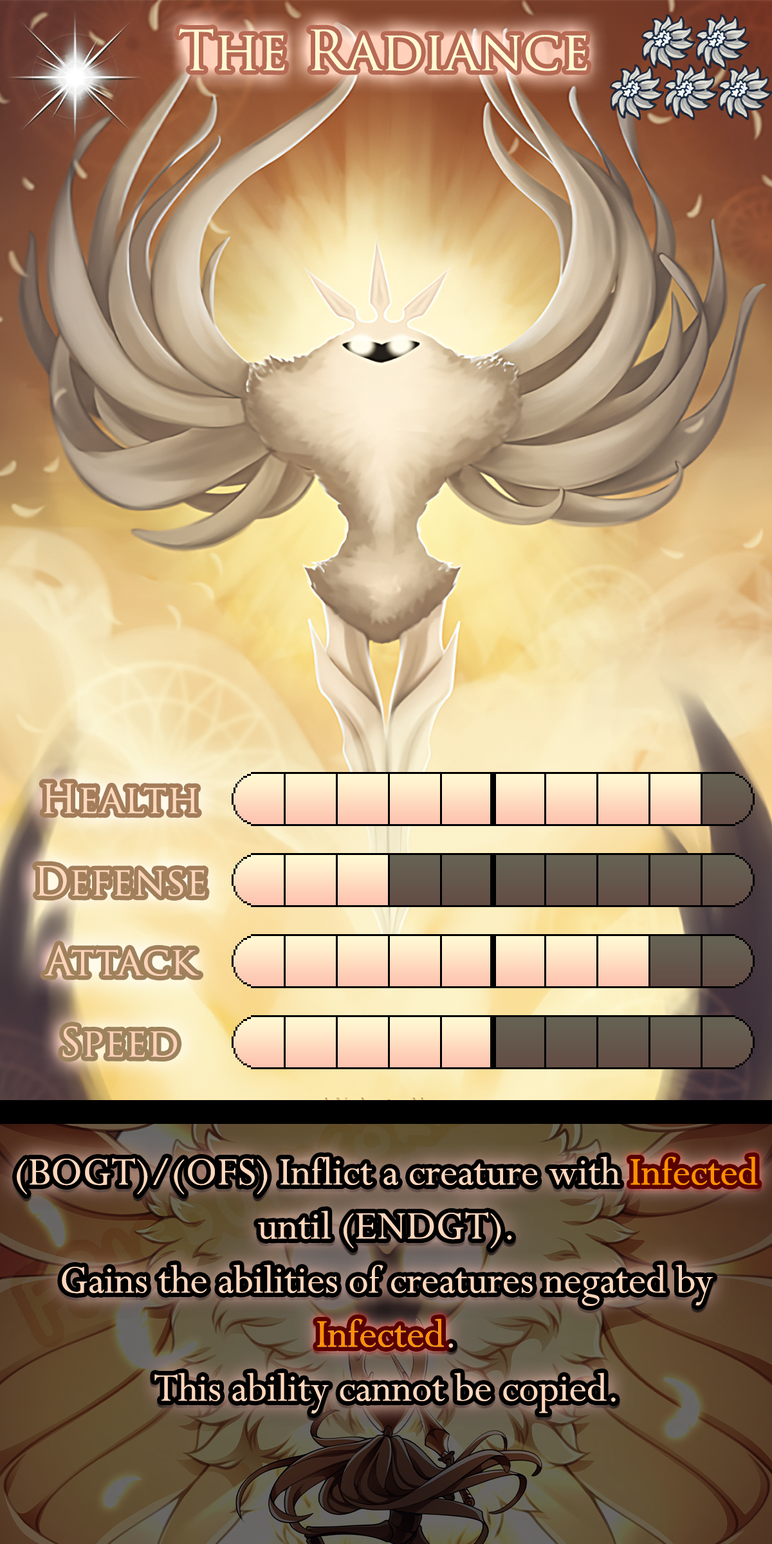
<style>
.page{position:relative;width:772px;height:1544px}
.page>*{position:absolute;margin:0}
.t1{font:92.7px "TrajanPro-Regular";color:#fff9d3}
.t2{font:67.6px "TrajanPro-Regular";color:#fedbc0}
.t3{font:67.6px "TrajanPro-Regular";color:#fed7bd}
.t4{font:67.6px "TrajanPro-Regular";color:#fed4bb}
.t5{font:67.6px "TrajanPro-Regular";color:#fed0b8}
.t6{font:75.3px/54.1px "Perpetua";color:#ffd7bd}
.t7{font:75.3px/54.1px "Perpetua";color:#ff9000}
.t8{font:75.3px "Perpetua";color:#ff9000}
</style>
<div class="page">
<p class="t1" style="left:179px;top:28px;width:408px;height:43px">The Radiance</p>
<p class="t2" style="left:43px;top:783px;width:155px;height:31px">Health</p>
<p class="t3" style="left:36px;top:865px;width:169px;height:31px">Defense</p>
<p class="t4" style="left:44px;top:945px;width:155px;height:31px">Attack</p>
<p class="t5" style="left:62px;top:1026px;width:116px;height:32px">Speed</p>
<p class="t6" style="left:17px;top:1157px;width:741px;height:257px;text-align:center">(BOGT)/(OFS) Inflict a creature with <span class="t7">Infected </span>until (ENDGT).<br>Gains the abilities of creatures negated by Infected.<br>This ability cannot be copied.</p>
<p class="t8" style="left:631px;top:1157px;width:126px;height:28px">Infected</p>
<p class="t8" style="left:317px;top:1319px;width:127px;height:28px">Infected</p>
</div>
